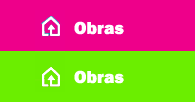
<style>
.page{position:relative;width:195px;height:102px;background:#6bee00}
.page>*{position:absolute;margin:0}
.t1{font:18px "FranklinGothic-Heavy";color:#ffffff}
</style>
<div class="page">
<p class="t1" style="left:74px;top:21px;width:50px;height:14px">Obras</p>
<p class="t1" style="left:74px;top:70px;width:50px;height:14px">Obras</p>
</div>
